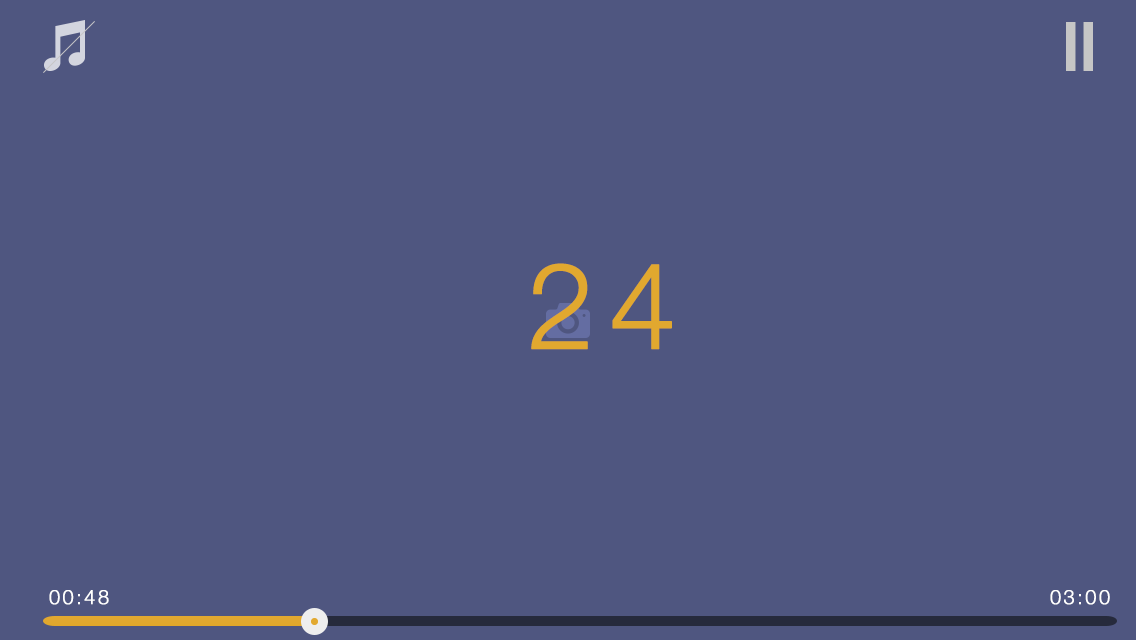
<style>
.page{position:relative;width:1136px;height:640px;background:#4f5680}
.page>*{position:absolute;margin:0}
.t1{font:120px "HelveticaNeue-Light";letter-spacing:0.1em;color:#e1a82f;font-weight:bold}
.t2{font:20px "HelveticaNeue-Light";letter-spacing:0.1em;color:#ffffff;font-weight:bold}
</style>
<div class="page">
<p class="t1" style="left:531px;top:263px;width:141px;height:87px">24</p>
<p class="t2" style="left:49px;top:590px;width:60px;height:15px">00:48</p>
<p class="t2" style="left:1050px;top:590px;width:60px;height:15px">03:00</p>
</div>
